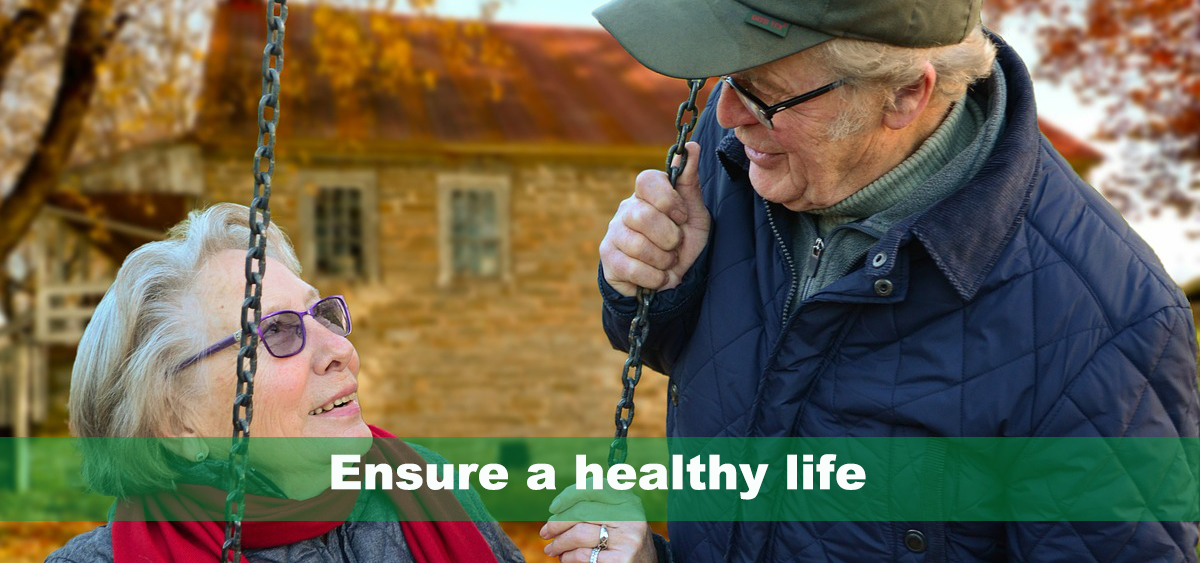
<style>
.page{position:relative;width:1200px;height:563px}
.page>*{position:absolute;margin:0}
.t1{font:48px "Arial-Black";color:#f9fdfc}
</style>
<div class="page">
<p class="t1" style="left:331px;top:454px;width:535px;height:46px">Ensure a healthy life</p>
</div>
